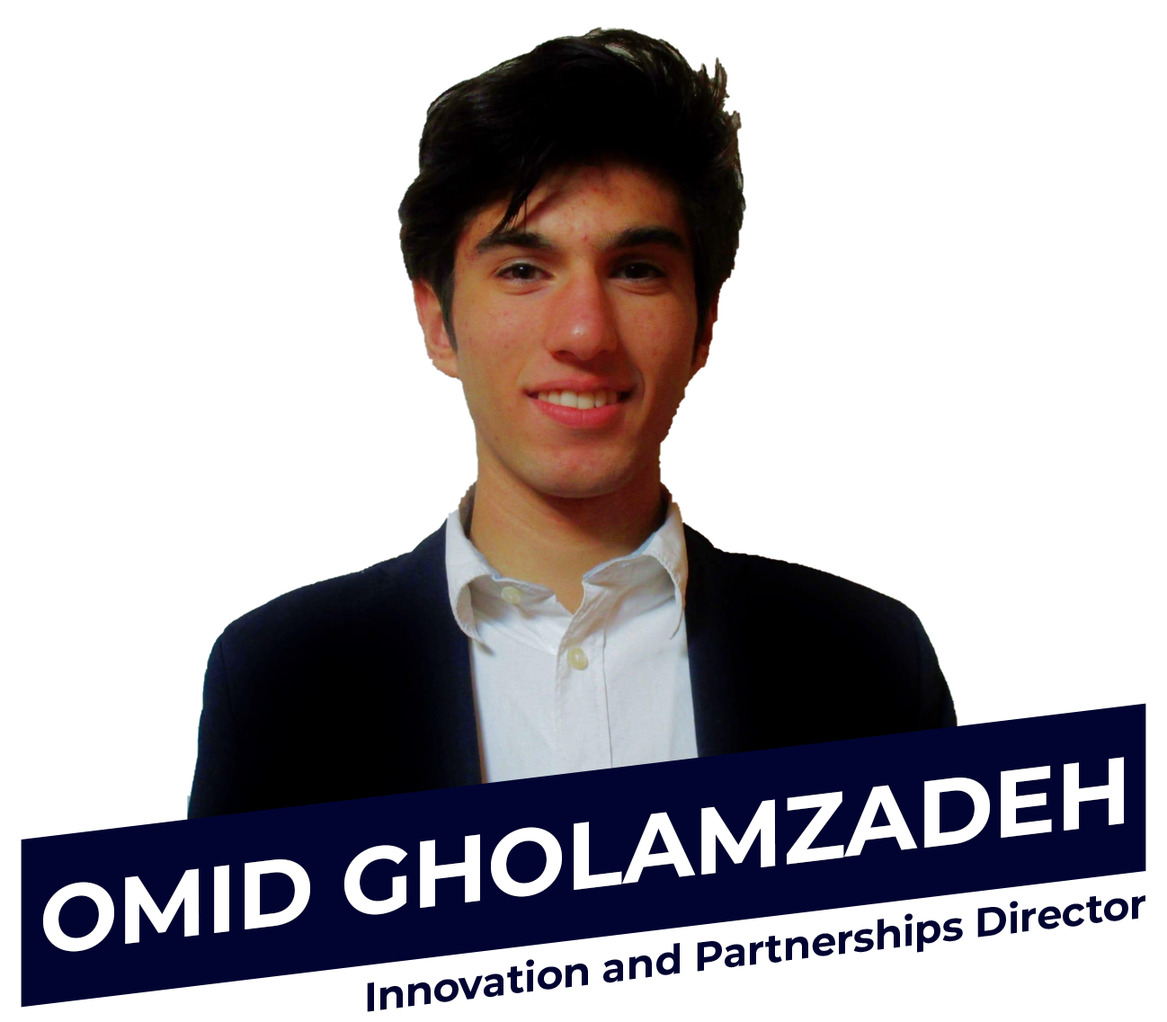
<style>
.page{position:relative;width:1167px;height:1022px;background:#ffffff}
.page>*{position:absolute;margin:0}
.t1{font:94.4px "Montserrat-Bold";color:#ffffff;text-transform:uppercase}
.t2{font:40.7px "Montserrat-Bold";color:#010431}
</style>
<div class="page">
<p class="t1" style="left:43px;top:757px;width:1081px;height:195px;rotate:-7deg">Omid Gholamzadeh</p>
<p class="t2" style="left:367px;top:895px;width:778px;height:117px;rotate:-7deg">Innovation and Partnerships Director</p>
</div>
